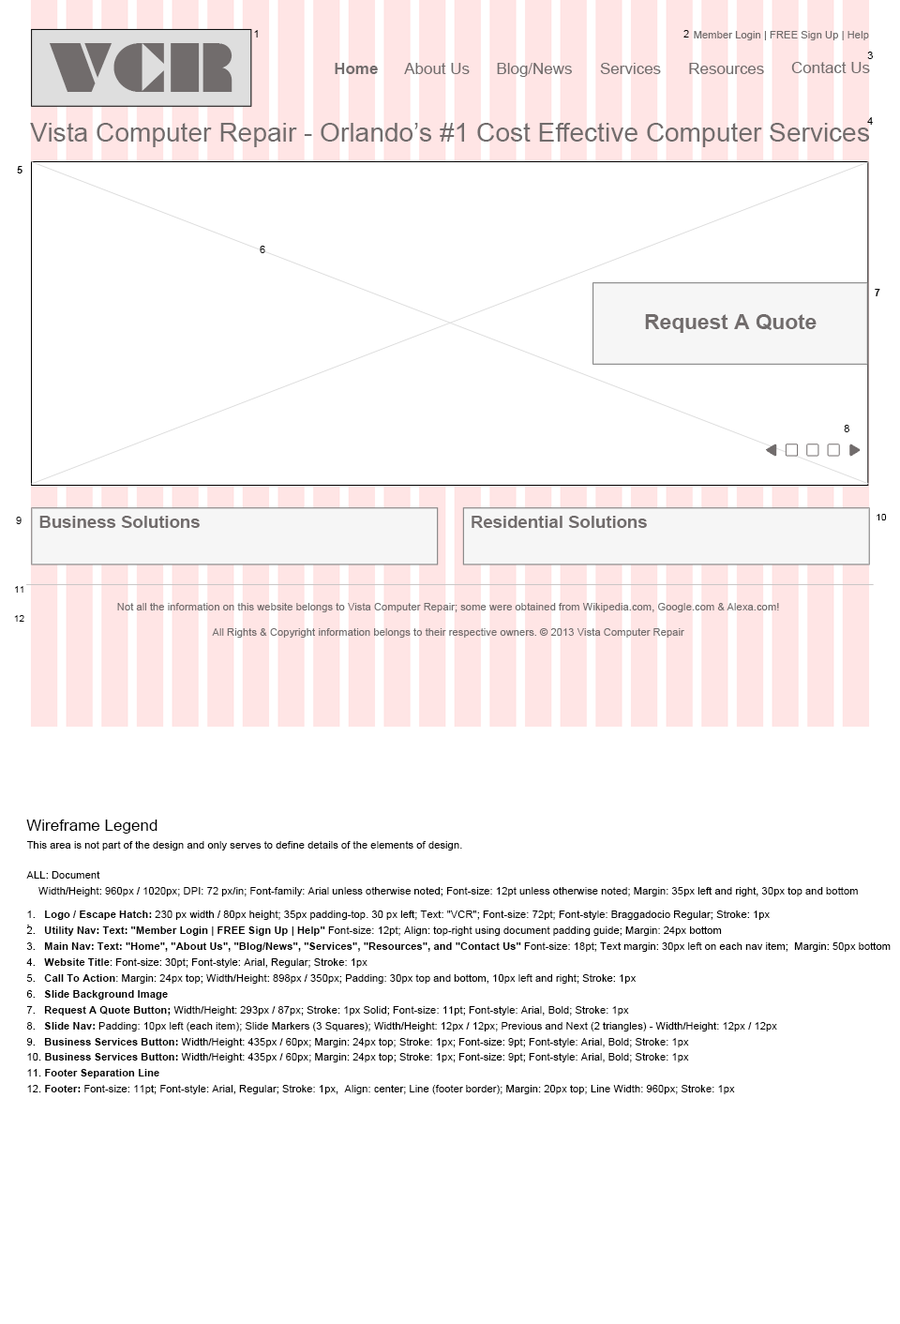
<style>
.page{position:relative;width:900px;height:1324px;background:#ffffff}
.page>*{position:absolute;margin:0}
.t1{font:10.6px "ArialMT";color:#000000}
.t2{font:10.6px "ArialMT";color:#716c6c}
.t3{font:63.6px "Braggadocio";color:#716c6c}
.t4{font:15.9px "Arial-BoldMT";color:#716c6c}
.t5{font:15.9px "ArialMT";color:#716c6c}
.t6{font:26.1px "ArialMT";color:#716c6c}
.t7{font:10.6px "Arial-BoldMT";color:#000000}
.t8{font:21px "Arial-BoldMT";color:#716c6c}
.t9{font:17.2px "Arial-BoldMT";color:#716c6c}
.t10{font:9.7px "ArialMT";color:#000000}
.t11{font:16px "ArialMT";color:#000000}
.t12{font:10.6px/7.9px "ArialMT";color:#000000}
.t13{font:10.6px/7.9px "Arial-BoldMT";color:#000000}
</style>
<div class="page">
<p class="t1" style="left:254px;top:30px;width:4px;height:8px">1</p>
<p class="t1" style="left:684px;top:30px;width:5px;height:8px">2</p>
<p class="t2" style="left:694px;top:31px;width:175px;height:9px">Member Login | FREE Sign Up | Help</p>
<p class="t3" style="left:49px;top:43px;width:184px;height:49px">VCR</p>
<p class="t1" style="left:868px;top:52px;width:5px;height:7px">3</p>
<p class="t4" style="left:335px;top:63px;width:43px;height:11px">Home</p>
<p class="t5" style="left:404px;top:63px;width:66px;height:11px">About Us</p>
<p class="t5" style="left:497px;top:63px;width:75px;height:14px">Blog/News</p>
<p class="t5" style="left:600px;top:63px;width:61px;height:11px">Services</p>
<p class="t5" style="left:689px;top:63px;width:75px;height:11px">Resources</p>
<p class="t5" style="left:792px;top:62px;width:78px;height:11px">Contact Us</p>
<p class="t6" style="left:30px;top:123px;width:839px;height:24px">Vista Computer Repair - Orlando’s #1 Cost Effective Computer Services</p>
<p class="t1" style="left:868px;top:117px;width:5px;height:8px">4</p>
<p class="t7" style="left:17px;top:166px;width:6px;height:8px">5</p>
<p class="t1" style="left:260px;top:246px;width:5px;height:7px">6</p>
<p class="t7" style="left:875px;top:289px;width:6px;height:7px">7</p>
<p class="t8" style="left:645px;top:314px;width:172px;height:19px">Request A Quote</p>
<p class="t1" style="left:844px;top:425px;width:6px;height:7px">8</p>
<p class="t1" style="left:16px;top:517px;width:6px;height:7px">9</p>
<p class="t9" style="left:39px;top:516px;width:161px;height:12px">Business Solutions</p>
<p class="t9" style="left:472px;top:516px;width:175px;height:12px">Residential Solutions</p>
<p class="t10" style="left:877px;top:514px;width:10px;height:7px">10</p>
<p class="t10" style="left:15px;top:586px;width:8px;height:7px">11</p>
<p class="t2" style="left:117px;top:603px;width:662px;height:35px;text-align:center">Not all the information on this website belongs to Vista Computer Repair; some were obtained from Wikipedia.com, Google.com &amp; Alexa.com!<br><br>All Rights &amp; Copyright information belongs to their respective owners. © 2013 Vista Computer Repair</p>
<p class="t10" style="left:14px;top:615px;width:10px;height:7px">12</p>
<p class="t11" style="left:26px;top:820px;width:132px;height:14px">Wireframe Legend</p>
<p class="t1" style="left:26px;top:841px;width:436px;height:10px">This area is not part of the design and only serves to define details of the elements of design.</p>
<p class="t12" style="left:26px;top:871px;width:865px;height:224px">ALL: Document<br><br>    Width/Height: 960px / 1020px; DPI: 72 px/in; Font-family: Arial unless otherwise noted; Font-size: 12pt unless otherwise noted; Margin: 35px left and right, 30px top and bottom<br><br><br>1.   <span class="t13">Logo / Escape Hatch:</span> 230 px width / 80px height; 35px padding-top. 30 px left; Text: "VCR"; Font-size: 72pt; Font-style: Braggadocio Regular; Stroke: 1px<br>,<br>2.   <span class="t13">Utility Nav: Text: "Member Login | FREE Sign Up | Help" </span>Font-size: 12pt; Align: top-right using document padding guide; Margin: 24px bottom<br><br>3.   <span class="t13">Main Nav: Text: "Home", "About Us", "Blog/News", "Services", "Resources", and "Contact Us"</span> Font-size: 18pt; Text margin: 30px left on each nav item;  Margin: 50px bottom<br><br>4.   <span class="t13">Website Title</span>: Font-size: 30pt; Font-style: Arial, Regular; Stroke: 1px<br><br>5.   <span class="t13">Call To Action</span>: Margin: 24px top; Width/Height: 898px / 350px; Padding: 30px top and bottom, 10px left and right; Stroke: 1px<br><br>6.   <span class="t13">Slide Background Image</span><br><br>7.   <span class="t13">Request A Quote Button; </span>Width/Height: 293px / 87px; Stroke: 1px Solid; Font-size: 11pt; Font-style: Arial, Bold; Stroke: 1px<br><br>8.   <span class="t13">Slide Nav:</span> Padding: 10px left (each item); Slide Markers (3 Squares); Width/Height: 12px / 12px; Previous and Next (2 triangles) - Width/Height: 12px / 12px<br><br>9.   <span class="t13">Business Services Button:</span> Width/Height: 435px / 60px; Margin: 24px top; Stroke: 1px; Font-size: 9pt; Font-style: Arial, Bold; Stroke: 1px<br><br>10. <span class="t13">Business Services Button:</span> Width/Height: 435px / 60px; Margin: 24px top; Stroke: 1px; Font-size: 9pt; Font-style: Arial, Bold; Stroke: 1px<br><br>11. <span class="t13">Footer Separation Line</span><br><br>12. <span class="t13">Footer:</span> Font-size: 11pt; Font-style: Arial, Regular; Stroke: 1px,  Align: center; Line (footer border); Margin: 20px top; Line Width: 960px; Stroke: 1px</p>
</div>
